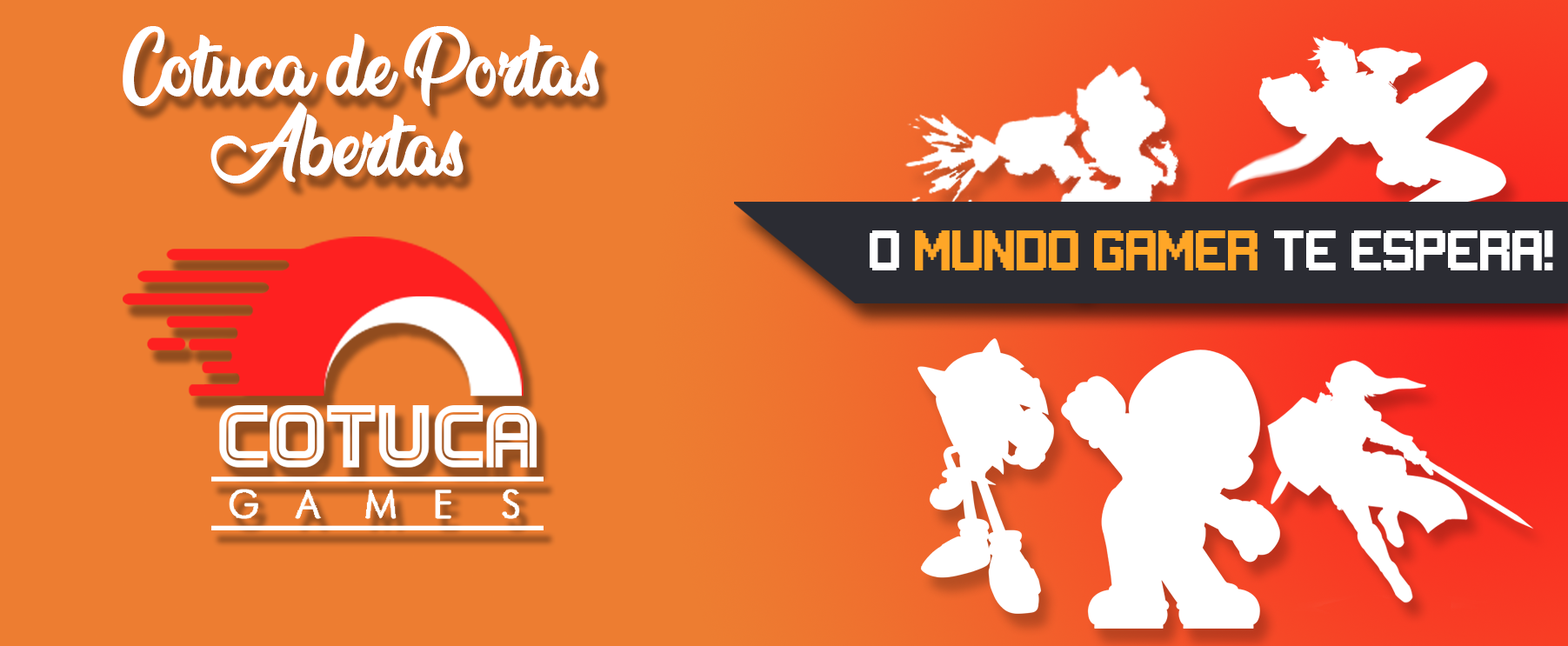
<style>
.page{position:relative;width:1568px;height:646px;background:#ed7d31}
.page>*{position:absolute;margin:0}
.t1{font:66.6px "FlowerPowerPersonalUse";color:#ffffff}
.t2{font:42.8px "Gameplay";color:#ffa627}
.t3{font:42.8px "Gameplay";color:#ffffff}
</style>
<div class="page">
<p class="t1" style="left:123px;top:26px;width:476px;height:157px">Cotuca de Portas <br>   Abertas</p>
<p class="t2" style="left:870px;top:230px;width:683px;height:40px"><span class="t3">O </span>MUNDO GAMER<span class="t3"> TE ESPERA!</span></p>
</div>
